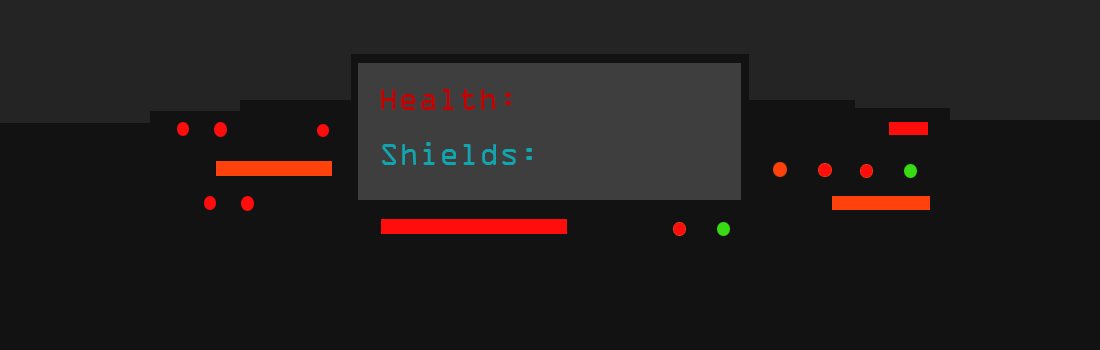
<style>
.page{position:relative;width:1100px;height:350px;background:#121212}
.page>*{position:absolute;margin:0}
.t1{font:33px "OCRAExtended";color:#c60000}
.t2{font:33px "OCRAExtended";color:#00bac6}
</style>
<div class="page">
<p class="t1" style="left:381px;top:89px;width:130px;height:21px">Health:</p>
<p class="t2" style="left:382px;top:142px;width:150px;height:23px;opacity:0.8">Shields:</p>
</div>
